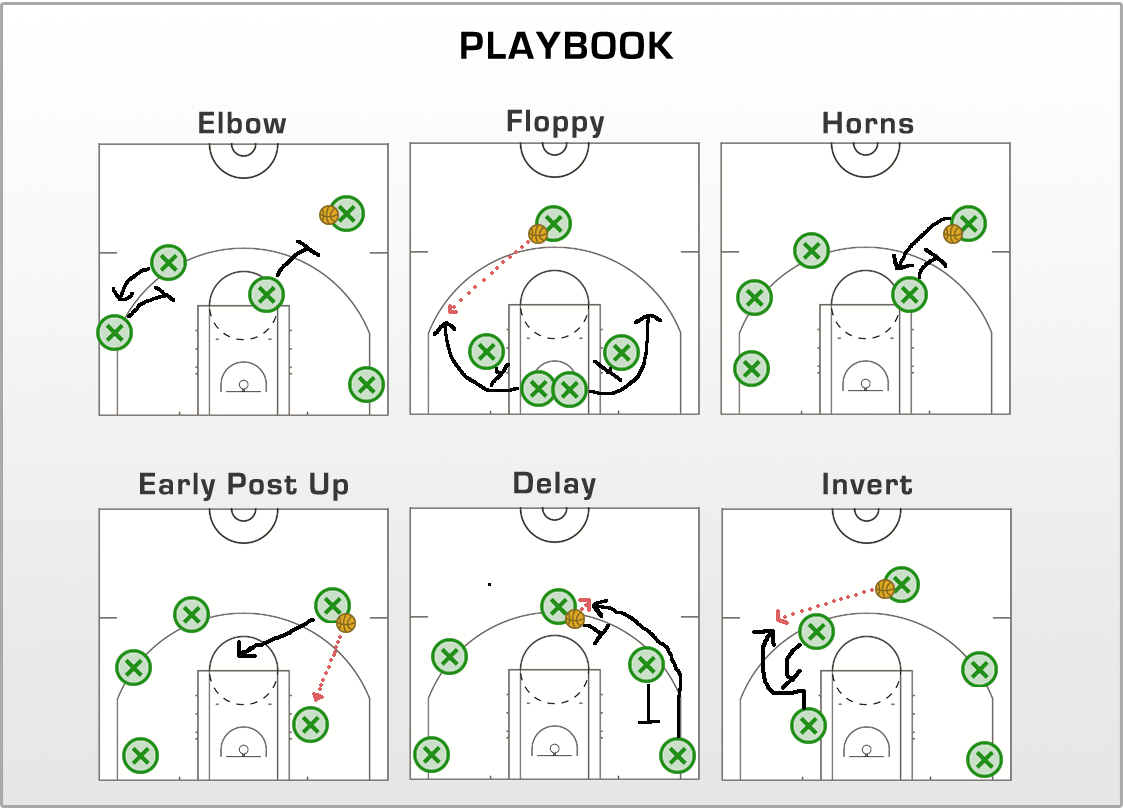
<style>
.page{position:relative;width:1123px;height:810px;background:#fffffe}
.page>*{position:absolute;margin:0}
.t1{font:40px "EurostileBold";letter-spacing:0.06em;color:#000000}
.t2{font:32px "EurostileBold";letter-spacing:0.06em;color:#373737}
</style>
<div class="page">
<p class="t1" style="left:461px;top:31px;width:213px;height:28px">PLAYBOOK</p>
<p class="t2" style="left:199px;top:111px;width:88px;height:23px">Elbow</p>
<p class="t2" style="left:507px;top:109px;width:98px;height:29px">Floppy</p>
<p class="t2" style="left:823px;top:111px;width:91px;height:23px">Horns</p>
<p class="t2" style="left:140px;top:472px;width:208px;height:29px">Early Post Up</p>
<p class="t2" style="left:514px;top:471px;width:82px;height:29px">Delay</p>
<p class="t2" style="left:823px;top:472px;width:89px;height:23px">Invert</p>
</div>
